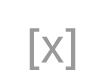
<style>
.page{position:relative;width:105px;height:83px;background:#ffffff}
.page>*{position:absolute;margin:0}
.t1{font:47.9px "DroidSans";color:#999999}
</style>
<div class="page">
<p class="t1" style="left:29px;top:28px;width:47px;height:42px">[x]</p>
</div>
